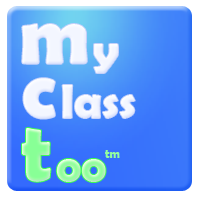
<style>
.page{position:relative;width:200px;height:200px}
.page>*{position:absolute;margin:0}
.t1{font:81.9px "BerlinSansFBDemi-Bold";color:#f3f6ff}
.t2{font:48px "BerlinSansFBDemi-Bold";color:#f3f6ff}
.t3{font:81.9px "BerlinSansFBDemi-Bold"}
.t4{font:12px "BerlinSansFBDemi-Bold";color:#94ff9e}
.t5{font:48px "BerlinSansFBDemi-Bold";color:#a5ffad}
</style>
<div class="page">
<p class="t1" style="left:22px;top:24px;width:65px;height:40px">m</p>
<p class="t2" style="left:94px;top:44px;width:24px;height:29px">y</p>
<p class="t1" style="left:23px;top:78px;width:32px;height:41px">c</p>
<p class="t1" style="left:23px;top:78px;width:32px;height:41px">c</p>
<p class="t2" style="left:62px;top:85px;width:73px;height:33px">lass</p>
<p class="t3" style="left:22px;top:128px;width:29px;height:54px">t</p>
<p class="t4" style="left:105px;top:150px;width:15px;height:8px">tm</p>
<p class="t5" style="left:56px;top:159px;width:50px;height:23px">oo</p>
</div>
